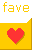
<style>
.page{position:relative;width:50px;height:50px;background:#ffffff}
.page>*{position:absolute;margin:0}
.t1{font:12px "Verdana";color:#ffcc00}
</style>
<div class="page">
<p class="t1" style="left:3px;top:2px;width:26px;height:10px">fave</p>
</div>
